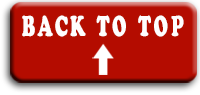
<style>
.page{position:relative;width:200px;height:95px;background:#b40c00}
.page>*{position:absolute;margin:0}
.t1{font:28.5px "CooperBlackStd";letter-spacing:0.15em;color:#fffefe;scale:0.62 1}
</style>
<div class="page">
<p class="t1" style="left:22px;top:15px;width:162px;height:22px">BACK TO TOP</p>
</div>
